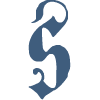
<style>
.page{position:relative;width:100px;height:100px;background:#ffffff}
.page>*{position:absolute;margin:0}
.t1{font:120px "GenzschEtHeyseAlternate";color:#3f5d7d}
</style>
<div class="page">
<p class="t1" style="left:28px;top:0px;width:43px;height:100px">s</p>
</div>
